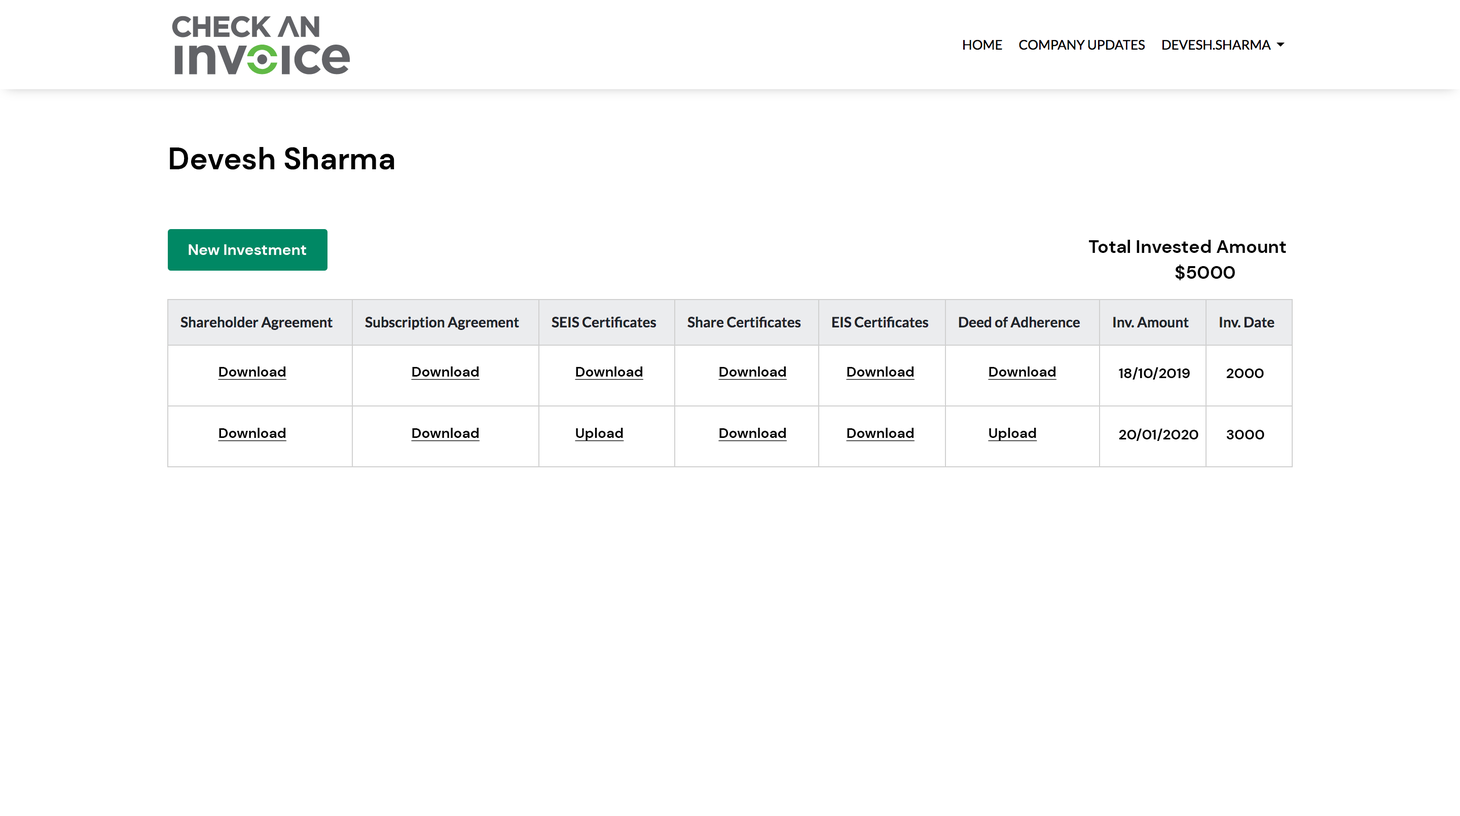
<style>
.page{position:relative;width:1460px;height:816px;background:#ffffff}
.page>*{position:absolute;margin:0}
.t1{font:30.4px "DMSans-Bold";color:#000000}
.t2{font:15.2px "DMSans-Bold";color:#ffffff}
.t3{font:18.3px "DMSans-Bold";color:#000000}
.t4{font:14.2px "DMSans-Bold";color:#000000;text-decoration:underline}
.t5{font:14.2px "DMSans-Bold";color:#000000}
</style>
<div class="page">
<p class="t1" style="left:170px;top:147px;width:225px;height:23px">Devesh Sharma</p>
<p class="t2" style="left:189px;top:244px;width:117px;height:11px">New Investment</p>
<p class="t3" style="left:1089px;top:240px;width:198px;height:13px">Total Invested Amount</p>
<p class="t3" style="left:1175px;top:265px;width:60px;height:15px">$5000</p>
<p class="t4" style="left:218px;top:367px;width:69px;height:13px">Download</p>
<p class="t4" style="left:411px;top:367px;width:69px;height:13px">Download</p>
<p class="t4" style="left:575px;top:367px;width:69px;height:13px">Download</p>
<p class="t4" style="left:719px;top:367px;width:68px;height:13px">Download</p>
<p class="t4" style="left:846px;top:367px;width:69px;height:13px">Download</p>
<p class="t4" style="left:988px;top:367px;width:69px;height:13px">Download</p>
<p class="t5" style="left:1119px;top:367px;width:71px;height:13px">18/10/2019</p>
<p class="t5" style="left:1227px;top:369px;width:37px;height:9px">2000</p>
<p class="t4" style="left:218px;top:428px;width:69px;height:14px">Download</p>
<p class="t4" style="left:411px;top:428px;width:69px;height:14px">Download</p>
<p class="t4" style="left:575px;top:428px;width:49px;height:14px">Upload</p>
<p class="t4" style="left:719px;top:428px;width:68px;height:14px">Download</p>
<p class="t4" style="left:846px;top:428px;width:69px;height:14px">Download</p>
<p class="t4" style="left:988px;top:428px;width:50px;height:14px">Upload</p>
<p class="t5" style="left:1119px;top:429px;width:80px;height:12px">20/01/2020</p>
<p class="t5" style="left:1227px;top:430px;width:38px;height:10px">3000</p>
</div>
